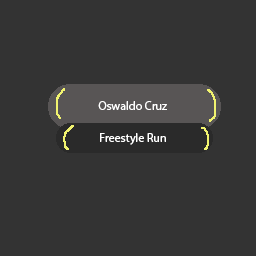
<style>
.page{position:relative;width:256px;height:256px;background:#333333}
.page>*{position:absolute;margin:0}
.t1{font:12px "MyriadPro-Regular";color:#ffffff}
</style>
<div class="page">
<p class="t1" style="left:98px;top:101px;width:69px;height:9px">Oswaldo Cruz</p>
<p class="t1" style="left:100px;top:133px;width:66px;height:12px">Freestyle Run</p>
</div>
